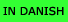
<style>
.page{position:relative;width:68px;height:22px;background:#33ff33}
.page>*{position:absolute;margin:0}
.t1{font:11px "Verdana";color:#000000}
</style>
<div class="page">
<p class="t1" style="left:3px;top:6px;width:61px;height:10px">IN DANISH</p>
</div>
